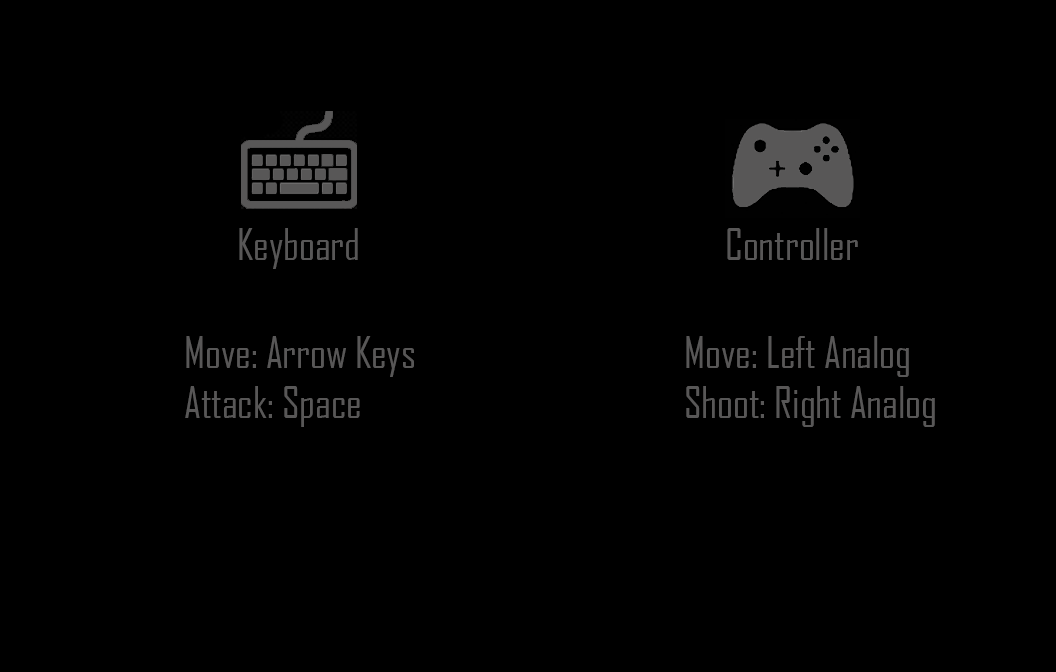
<style>
.page{position:relative;width:1056px;height:672px;background:#000000}
.page>*{position:absolute;margin:0}
.t1{font:41.7px "AgencyFB-Reg";color:#585757}
</style>
<div class="page">
<p class="t1" style="left:239px;top:228px;width:119px;height:41px">Keyboard</p>
<p class="t1" style="left:727px;top:228px;width:131px;height:32px">Controller</p>
<p class="t1" style="left:185px;top:336px;width:229px;height:91px">Move: Arrow Keys<br>Attack: Space</p>
<p class="t1" style="left:686px;top:336px;width:249px;height:91px">Move: Left Analog<br>Shoot: Right Analog</p>
</div>
